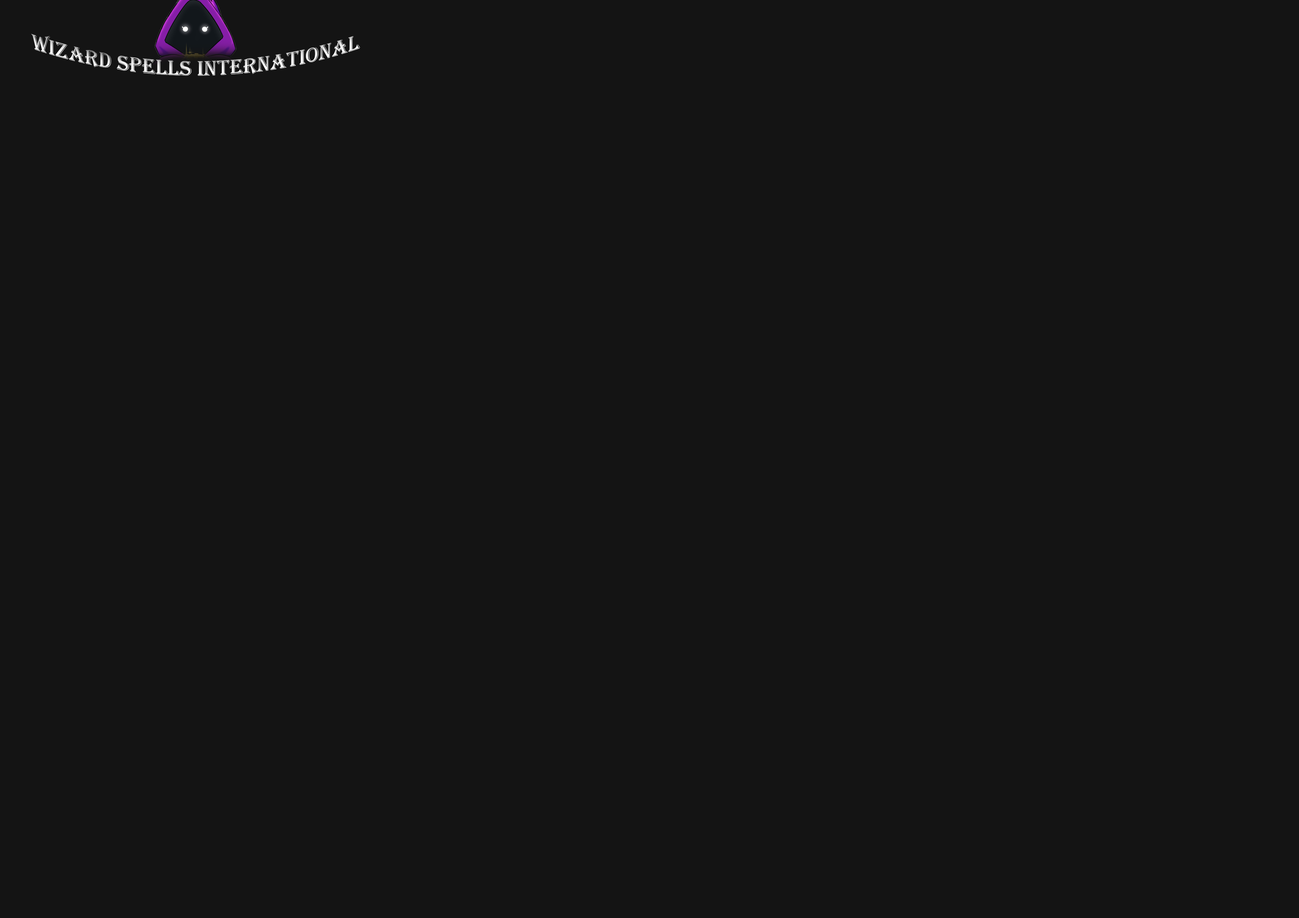
<style>
.page{position:relative;width:1299px;height:918px;background:#141414}
.page>*{position:absolute;margin:0}
.t1{font:21.6px "Algerian";color:#ffffff}
</style>
<div class="page">
<p class="t1" style="left:31px;top:34px;width:329px;height:42px">Wizard spells international</p>
</div>
